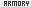
<style>
.page{position:relative;width:32px;height:8px;background:#e6e9ea}
.page>*{position:absolute;margin:0}
.t1{font:8px "Small-5x3";color:#3c3c3c}
</style>
<div class="page">
<p class="t1" style="left:4px;top:1px;width:25px;height:5px">ARMORY</p>
</div>
